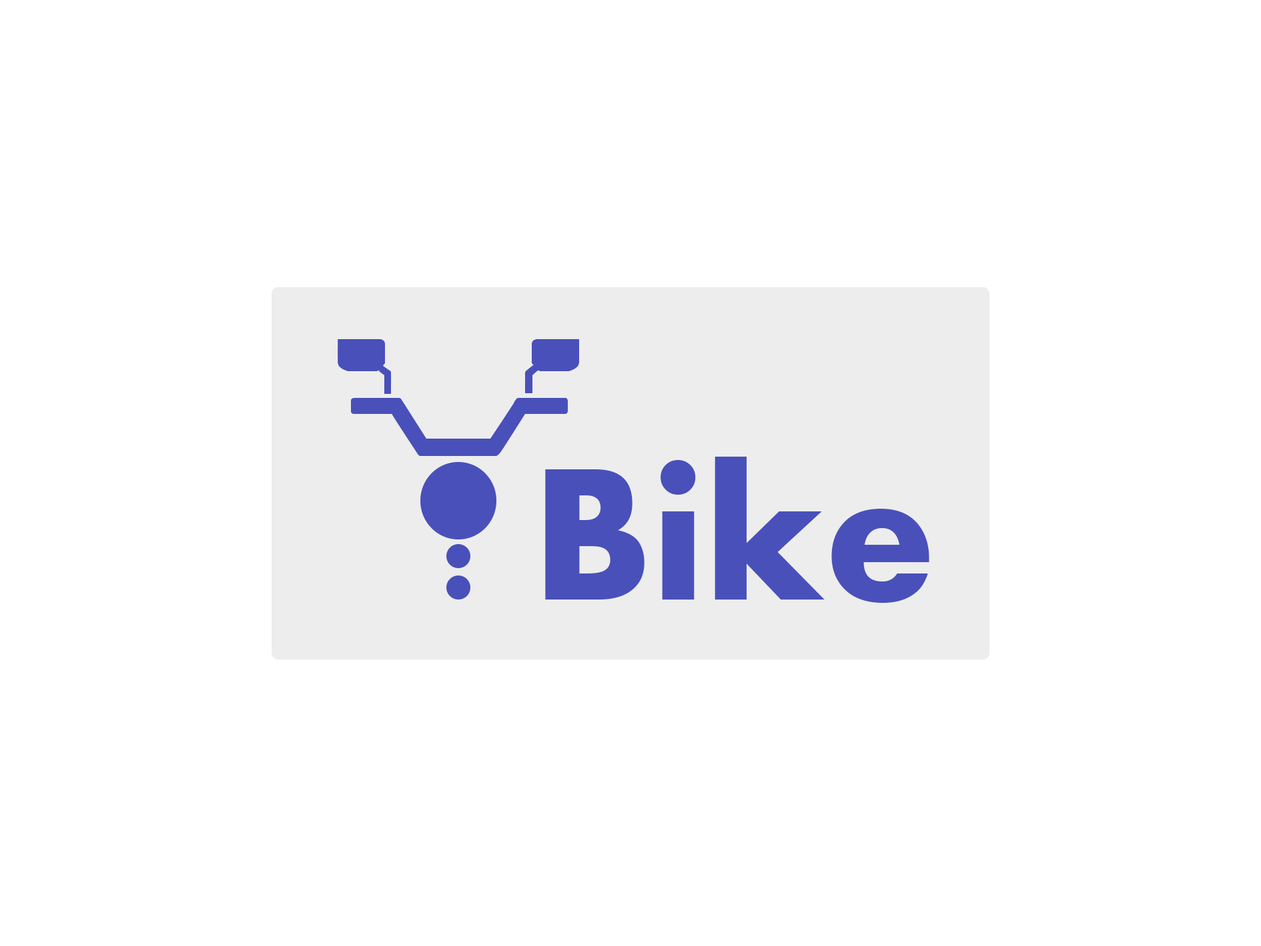
<style>
.page{position:relative;width:1261px;height:946px;background:#ffffff}
.page>*{position:absolute;margin:0}
.t1{font:194.6px "AharoniBold";color:#4950ba}
</style>
<div class="page">
<p class="t1" style="left:545px;top:456px;width:385px;height:147px">Bike</p>
</div>
